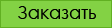
<style>
.page{position:relative;width:112px;height:28px;background:#83d244}
.page>*{position:absolute;margin:0}
.t1{font:18px "CenturyGothic";color:#000000}
</style>
<div class="page">
<p class="t1" style="left:18px;top:6px;width:78px;height:13px">Заказать</p>
</div>
